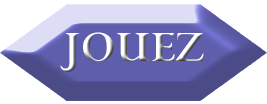
<style>
.page{position:relative;width:267px;height:104px;background:#ffffff}
.page>*{position:absolute;margin:0}
.t1{font:48px "Perpetua-Bold"}
</style>
<div class="page">
<p class="t1" style="left:60px;top:32px;width:144px;height:40px">JOUEZ</p>
</div>
